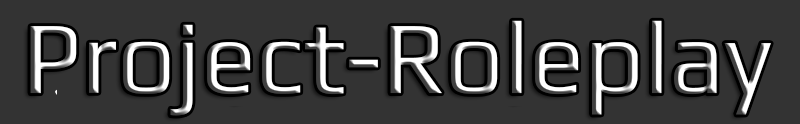
<style>
.page{position:relative;width:800px;height:124px;background:#333333}
.page>*{position:absolute;margin:0}
.t1{font:103px "Play"}
</style>
<div class="page">
<p class="t1" style="left:30px;top:20px;width:741px;height:96px">Project-Roleplay</p>
</div>
